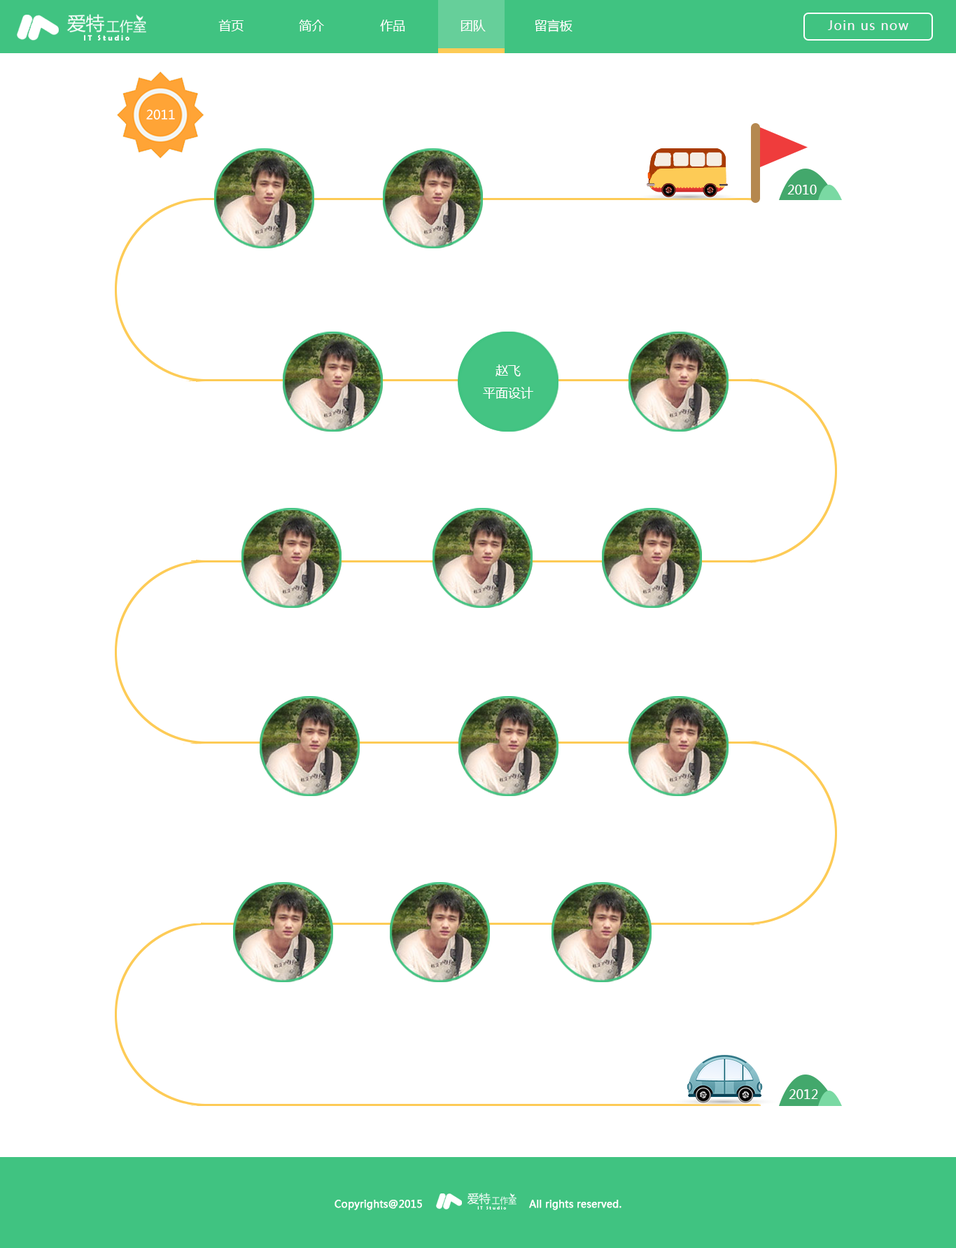
<style>
.page{position:relative;width:956px;height:1248px;background:#ffffff}
.page>*{position:absolute;margin:0}
.t1{font:12.6px "MicrosoftYaHei";color:#ffffff}
.t2{font:12.6px "MicrosoftYaHei";letter-spacing:0.075em;color:#fff4ff}
.t3{font:7.8px "BerlinSansFBDemi-Bold";color:#ffffff}
.t4{font:9.8px "MicrosoftYaHei";color:#ffffff;font-weight:bold}
.t5{font:4.9px "BerlinSansFBDemi-Bold";color:#ffffff}
</style>
<div class="page">
<p class="t1" style="left:218px;top:20px;width:25px;height:11px">首页</p>
<p class="t1" style="left:299px;top:20px;width:25px;height:11px">简介</p>
<p class="t1" style="left:380px;top:20px;width:25px;height:11px">作品</p>
<p class="t1" style="left:460px;top:20px;width:25px;height:11px">团队</p>
<p class="t1" style="left:534px;top:20px;width:38px;height:12px">留言板</p>
<p class="t2" style="left:828px;top:20px;width:80px;height:10px">Join us now</p>
<p class="t3" style="left:84px;top:35px;width:45px;height:6px">I T   S t u d i o</p>
<p class="t1" style="left:146px;top:109px;width:29px;height:11px">2011</p>
<p class="t1" style="left:787px;top:185px;width:29px;height:9px">2010</p>
<p class="t1" style="left:483px;top:364px;width:50px;height:35px;text-align:center">赵飞<br>平面设计</p>
<p class="t1" style="left:788px;top:1089px;width:30px;height:10px">2012</p>
<p class="t4" style="left:334px;top:1200px;width:88px;height:10px">Copyrights@2015</p>
<p class="t5" style="left:477px;top:1206px;width:29px;height:3px">I T   S t u d i o</p>
<p class="t4" style="left:529px;top:1200px;width:92px;height:10px">All rights reserved.</p>
</div>
